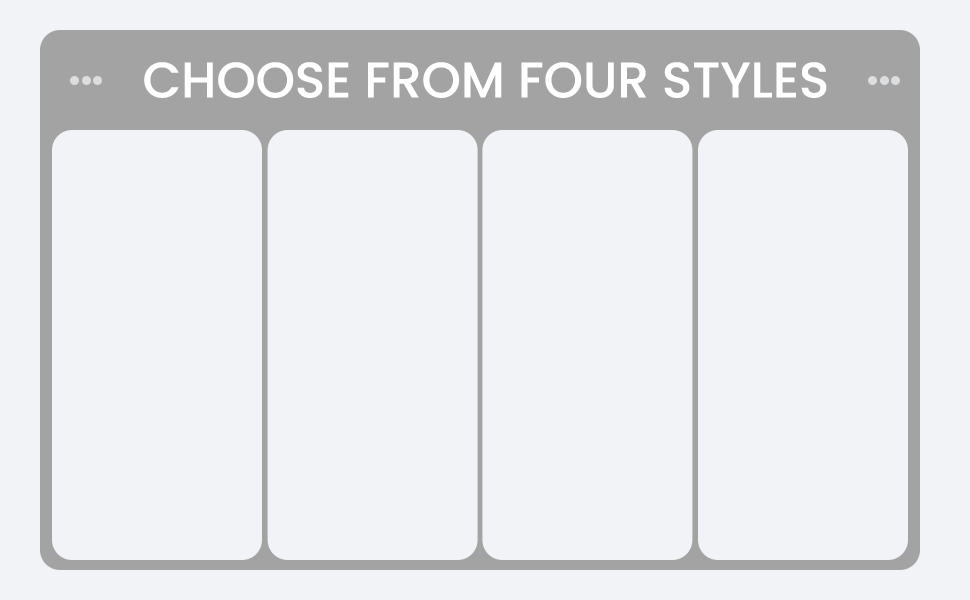
<style>
.page{position:relative;width:970px;height:600px;background:#f2f3f6}
.page>*{position:absolute;margin:0}
.t1{font:50px "Poppins-Medium";color:#ffffff}
</style>
<div class="page">
<p class="t1" style="left:144px;top:62px;width:683px;height:36px">CHOOSE FROM FOUR STYLES</p>
</div>
